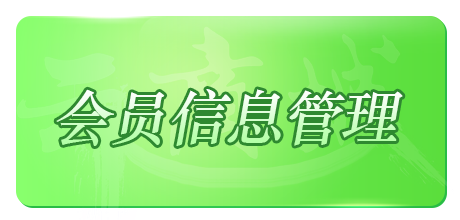
<style>
.page{position:relative;width:460px;height:220px}
.page>*{position:absolute;margin:0}
.t1{font:59px "STZhongsong";letter-spacing:-0.025em;font-style:italic}
</style>
<div class="page">
<p class="t1" style="left:56px;top:89px;width:347px;height:57px">会员信息管理</p>
</div>
